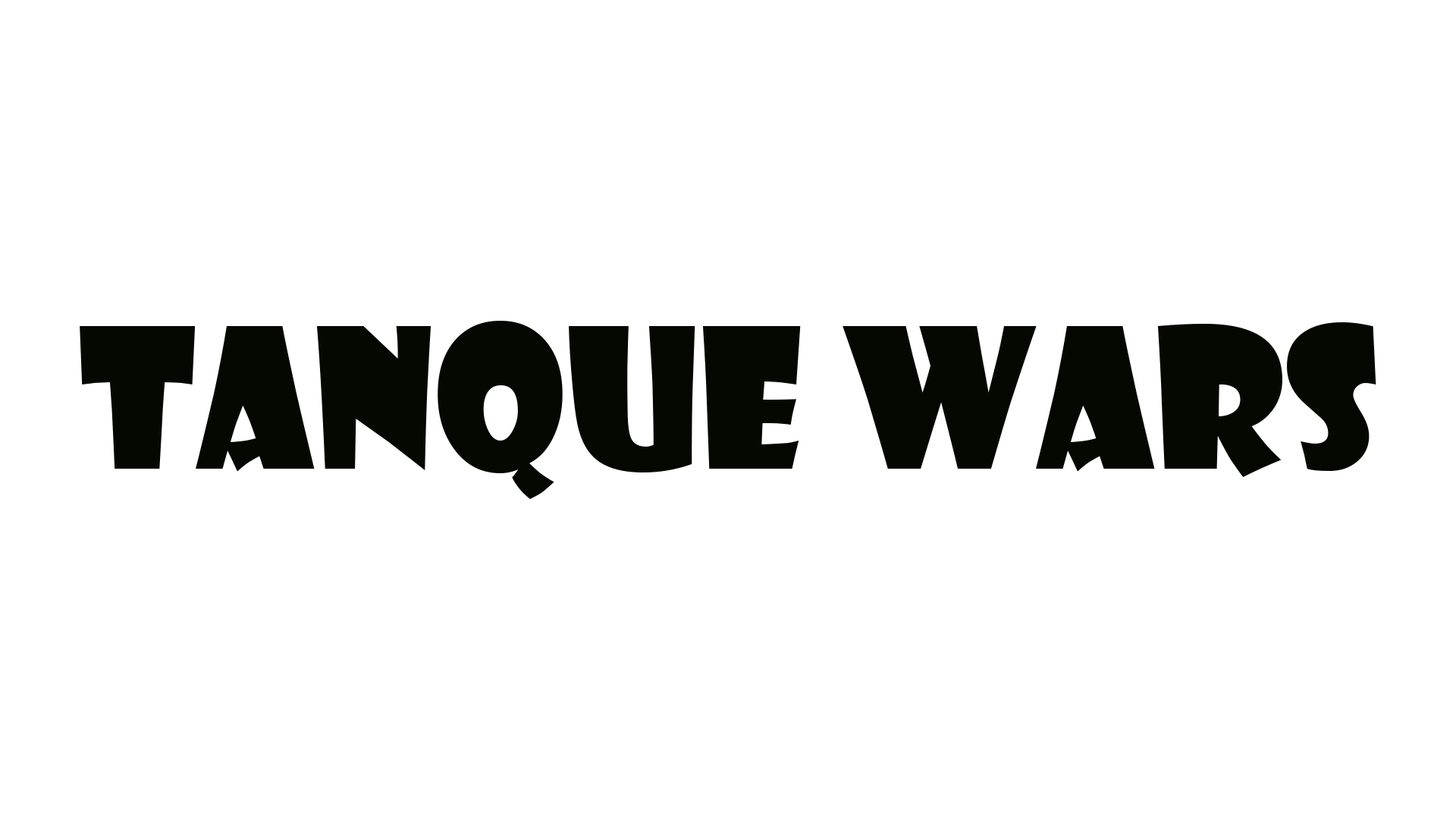
<style>
.page{position:relative;width:1456px;height:819px;background:#ffffff}
.page>*{position:absolute;margin:0}
.t1{font:189.6px "ShowcardGothic-Reg";color:#050800}
</style>
<div class="page">
<p class="t1" style="left:80px;top:321px;width:1296px;height:178px">Tanque wars</p>
</div>
